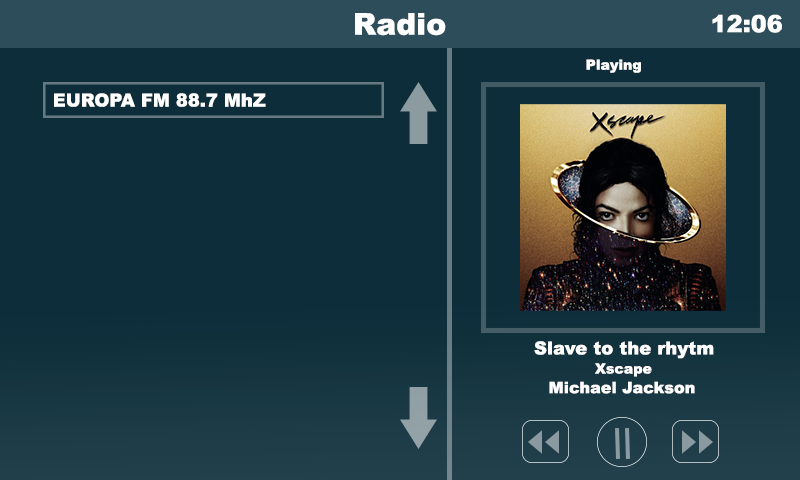
<style>
.page{position:relative;width:800px;height:480px;background:#0c2d39}
.page>*{position:absolute;margin:0}
.t1{font:30px "Arial-Black";color:#ffffff}
.t2{font:24px "Arial-Black";color:#ffffff}
.t3{font:14px "Arial-Black";color:#ffffff}
.t4{font:18px "Arial-Black";color:#ffffff}
.t5{font:16px "Arial-Black";color:#ffffff}
</style>
<div class="page">
<p class="t1" style="left:355px;top:13px;width:91px;height:23px">Radio</p>
<p class="t2" style="left:712px;top:14px;width:70px;height:19px">12:06</p>
<p class="t3" style="left:586px;top:59px;width:55px;height:14px">Playing</p>
<p class="t4" style="left:54px;top:93px;width:212px;height:14px">EUROPA FM 88.7 MhZ</p>
<p class="t4" style="left:534px;top:341px;width:180px;height:18px">Slave to the rhytm</p>
<p class="t3" style="left:595px;top:363px;width:57px;height:14px">Xscape</p>
<p class="t5" style="left:549px;top:381px;width:146px;height:13px">Michael Jackson</p>
</div>
